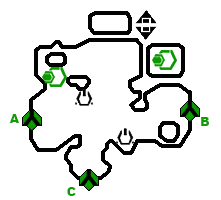
<style>
.page{position:relative;width:221px;height:200px;background:#ffffff}
.page>*{position:absolute;margin:0}
.t1{font:12px "Arial-Black";color:#0d9e01}
</style>
<div class="page">
<p class="t1" style="left:9px;top:114px;width:10px;height:9px">A</p>
<p class="t1" style="left:201px;top:117px;width:8px;height:9px">B</p>
<p class="t1" style="left:67px;top:187px;width:9px;height:9px">C</p>
</div>
